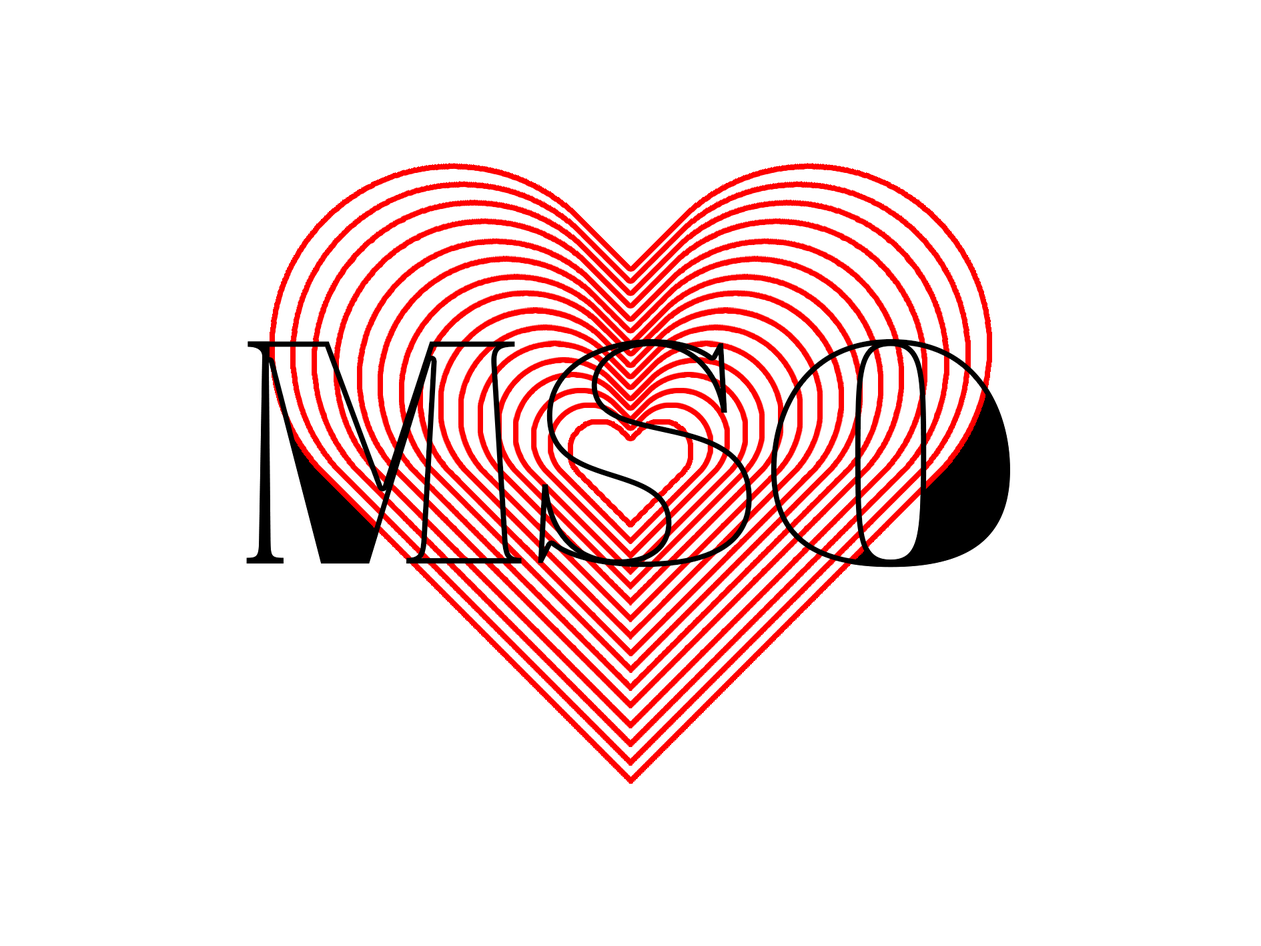
<style>
.page{position:relative;width:1261px;height:946px;background:#ffffff}
.page>*{position:absolute;margin:0}
.t1{font:294.3px "Barabajagal"}
</style>
<div class="page">
<p class="t1" style="left:246px;top:338px;width:764px;height:229px">MSO</p>
<p class="t1" style="left:246px;top:338px;width:764px;height:229px">MSO</p>
</div>
